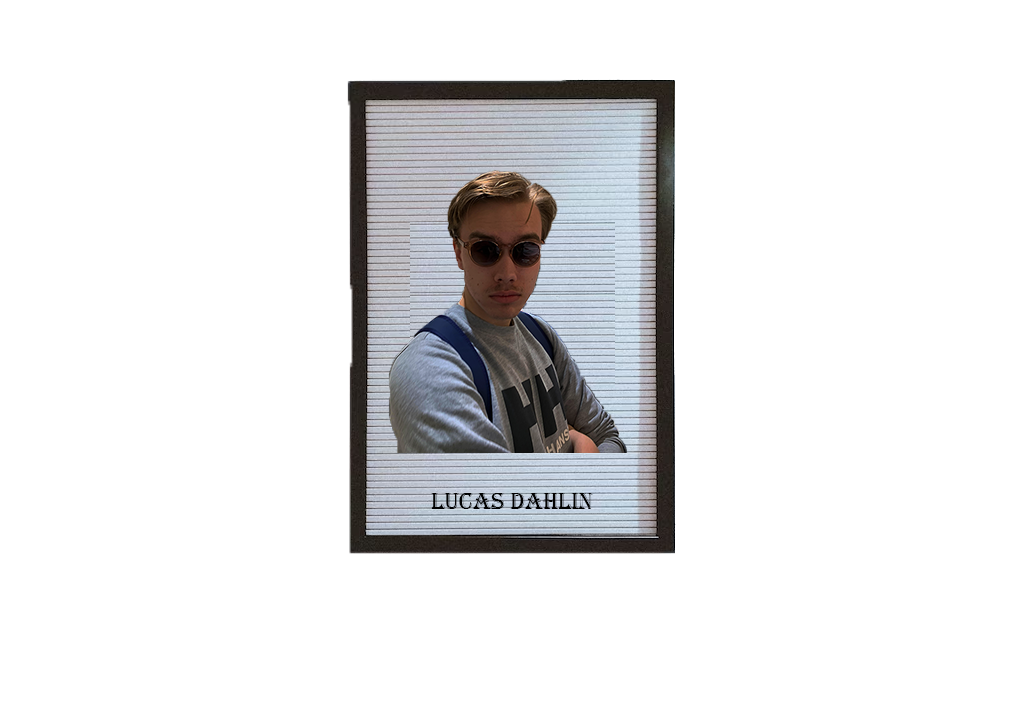
<style>
.page{position:relative;width:1024px;height:728px;background:#ffffff}
.page>*{position:absolute;margin:0}
.t1{font:24px "Algerian";color:#010101}
</style>
<div class="page">
<p class="t1" style="left:431px;top:493px;width:162px;height:16px">Lucas Dahlin</p>
</div>
